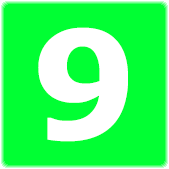
<style>
.page{position:relative;width:169px;height:169px;background:#00ff33}
.page>*{position:absolute;margin:0}
.t1{font:150px "Verdana-Bold";color:#ffffff;text-transform:uppercase}
</style>
<div class="page">
<p class="t1" style="left:38px;top:27px;width:90px;height:115px">9</p>
</div>
